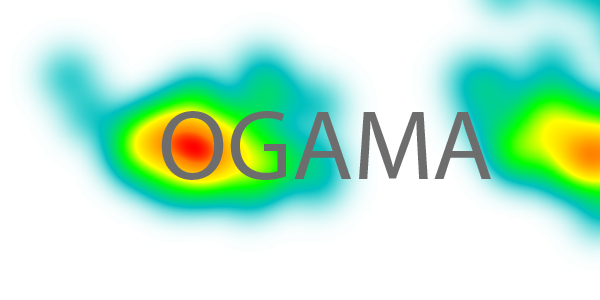
<style>
.page{position:relative;width:600px;height:300px;background:#ffffff}
.page>*{position:absolute;margin:0}
.t1{font:100px "MyriadPro-Regular";color:#6e6d6d}
</style>
<div class="page">
<p class="t1" style="left:161px;top:111px;width:330px;height:69px">OGAMA</p>
</div>
